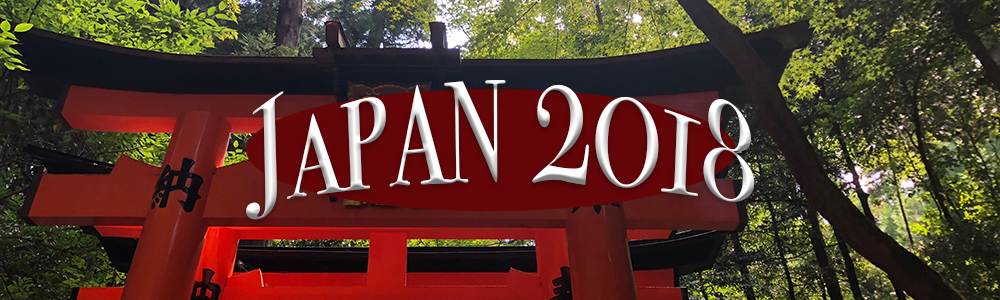
<style>
.page{position:relative;width:1000px;height:300px}
.page>*{position:absolute;margin:0}
.t1{font:125px "BodoniSvtyTwoSCITCTT-Book"}
</style>
<div class="page">
<p class="t1" style="left:246px;top:80px;width:509px;height:140px">Japan 2018</p>
</div>
